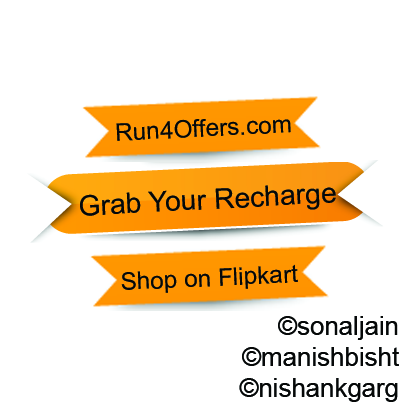
<style>
.page{position:relative;width:407px;height:407px;background:#ffffff}
.page>*{position:absolute;margin:0}
.t1{font:24.4px "ArialMT";color:#060808}
.t2{font:28.4px "ArialMT";color:#060808}
.t3{font:25.9px "ArialMT";color:#060808}
</style>
<div class="page">
<p class="t1" style="left:116px;top:119px;width:175px;height:22px">Run4Offers.com</p>
<p class="t2" style="left:80px;top:185px;width:256px;height:31px">Grab Your Recharge</p>
<p class="t1" style="left:121px;top:264px;width:177px;height:29px">Shop on Flipkart</p>
<p class="t3" style="left:239px;top:316px;width:160px;height:86px">sonaljain©<br>manishbisht©<br>nishankgarg©</p>
</div>
